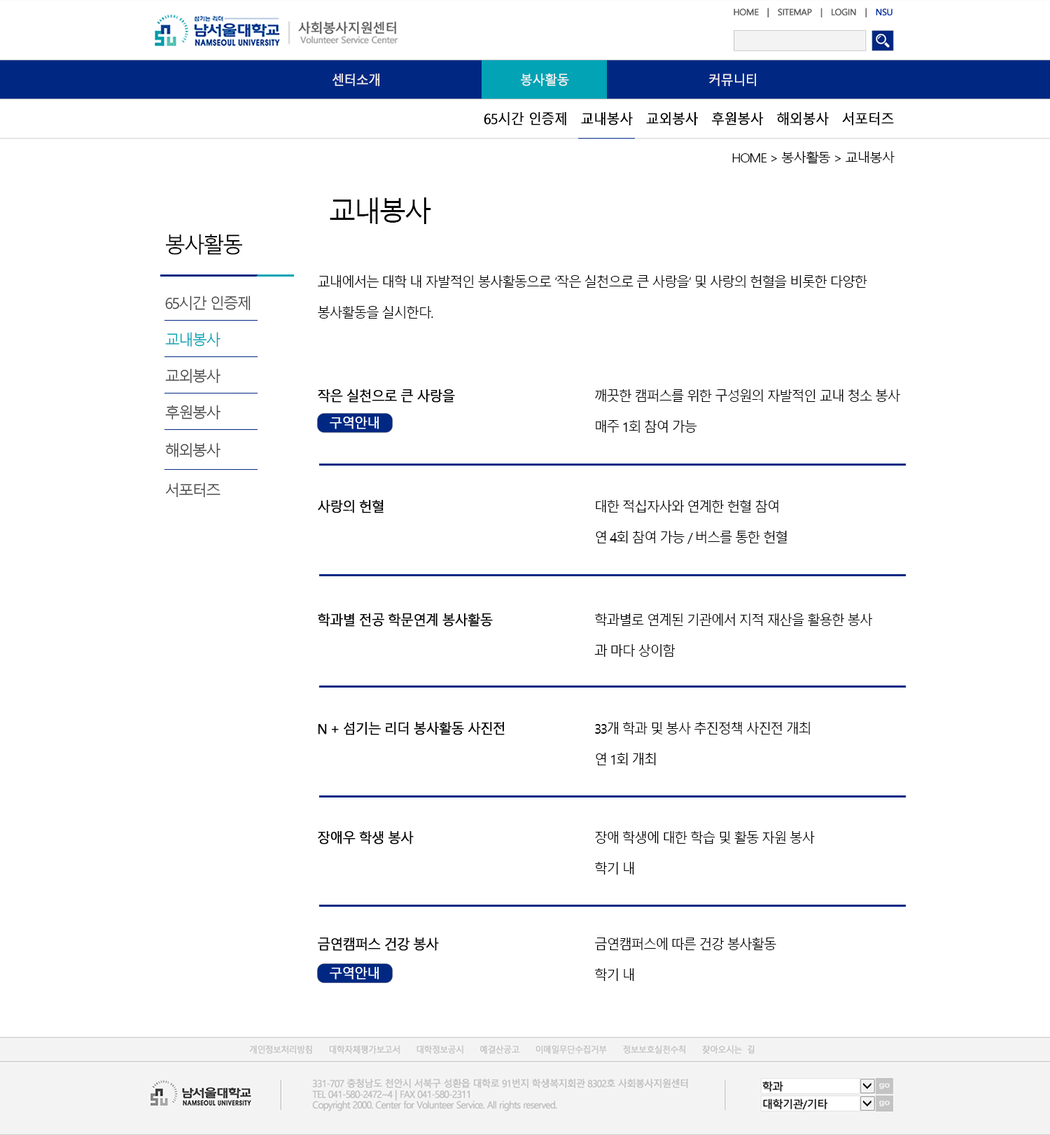
<style>
.page{position:relative;width:1050px;height:1135px;background:#ffffff}
.page>*{position:absolute;margin:0}
.t1{font:13.1px "MalgunGothicRegular";letter-spacing:-0.05em;color:#f3f3f3;font-weight:bold;scale:0.95 1}
.t2{font:14px "MalgunGothicRegular";letter-spacing:-0.05em;color:#000000;font-weight:bold;scale:0.95 1}
.t3{font:12.9px "MalgunGothicRegular";letter-spacing:-0.1em;color:#000000;scale:1.05 1}
.t4{font:28px "MalgunGothicRegular";letter-spacing:-0.1em;color:#000000}
.t5{font:21.8px "MalgunGothicRegular";letter-spacing:-0.1em;color:#000000}
.t6{font:14.3px/30.8px "MalgunGothicRegular";letter-spacing:-0.1em;color:#000000;scale:0.95 1}
.t7{font:15.1px "MalgunGothicRegular";letter-spacing:-0.1em;color:#454444}
.t8{font:15.1px "MalgunGothicRegular";letter-spacing:-0.1em;color:#01a3b5}
.t9{font:14.3px/30.8px "MalgunGothicRegular";letter-spacing:-0.1em;color:#000000;font-weight:bold;scale:0.95 1}
</style>
<div class="page">
<p class="t1" style="left:333px;top:73px;width:423px;height:13px">센터소개        봉사활동       커뮤니티</p>
<p class="t2" style="left:484px;top:112px;width:410px;height:13px">65시간 인증제　교내봉사　교외봉사　후원봉사　해외봉사　서포터즈</p>
<p class="t3" style="left:733px;top:151px;width:162px;height:13px">HOME &gt; 봉사활동 &gt; 교내봉사</p>
<p class="t4" style="left:330px;top:197px;width:101px;height:27px">교내봉사</p>
<p class="t5" style="left:166px;top:234px;width:76px;height:21px">봉사활동</p>
<p class="t6" style="left:318px;top:275px;width:550px;height:44px">교내에서는 대학 내 자발적인 봉사활동으로 ‘작은 실천으로 큰 사랑을’ 및 사랑의 헌혈을 비롯한 다양한 <br>봉사활동을 실시한다.</p>
<p class="t7" style="left:165px;top:296px;width:86px;height:15px">65시간 인증제</p>
<p class="t8" style="left:165px;top:332px;width:56px;height:15px">교내봉사</p>
<p class="t7" style="left:165px;top:368px;width:56px;height:16px">교외봉사</p>
<p class="t6" style="left:318px;top:389px;width:583px;height:44px"><span class="t9">작은 실천으로 큰 사랑을</span>       깨끗한 캠퍼스를 위한 구성원의 자발적인 교내 청소 봉사<br>      　     매주 1회 참여 가능</p>
<p class="t7" style="left:165px;top:405px;width:56px;height:15px">후원봉사</p>
<p class="t7" style="left:165px;top:443px;width:56px;height:15px">해외봉사</p>
<p class="t7" style="left:165px;top:483px;width:56px;height:15px">서포터즈</p>
<p class="t6" style="left:318px;top:500px;width:469px;height:44px"><span class="t9">사랑의 헌혈    　      </span>대한 적십자사와 연계한 헌혈 참여<br>      　     연 4회 참여 가능 / 버스를 통한 헌혈</p>
<p class="t6" style="left:318px;top:613px;width:555px;height:44px"><span class="t9">학과별 전공 학문연계 봉사활동     </span>학과별로 연계된 기관에서 지적 재산을 활용한 봉사<br>           과 마다 상이함</p>
<p class="t6" style="left:318px;top:722px;width:492px;height:43px"><span class="t9">N + 섬기는 리더 봉사활동 사진전     </span>33개 학과 및 봉사 추진정책 사진전 개최<br>           연 1회 개최</p>
<p class="t6" style="left:318px;top:831px;width:497px;height:44px"><span class="t9">장애우 학생 봉사         </span>장애 학생에 대한 학습 및 활동 자원 봉사<br>           학기 내</p>
<p class="t6" style="left:318px;top:938px;width:459px;height:43px"><span class="t9">금연캠퍼스 건강 봉사        </span>금연캠퍼스에 따른 건강 봉사활동<br>           학기 내</p>
</div>
